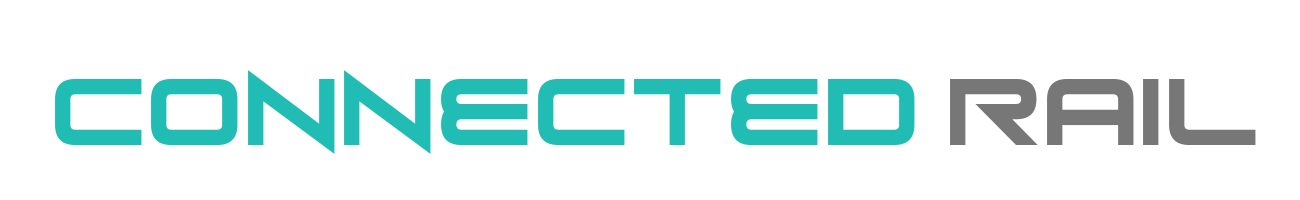
<style>
.page{position:relative;width:1300px;height:200px;background:#ffffff}
.page>*{position:absolute;margin:0}
.t1{font:104.2px "LongFox";color:#21bdb4}
.t2{font:104.2px "LongFox";color:#777777}
</style>
<div class="page">
<p class="t1" style="left:55px;top:70px;width:1201px;height:84px">Connected <span class="t2">Rail</span></p>
</div>
